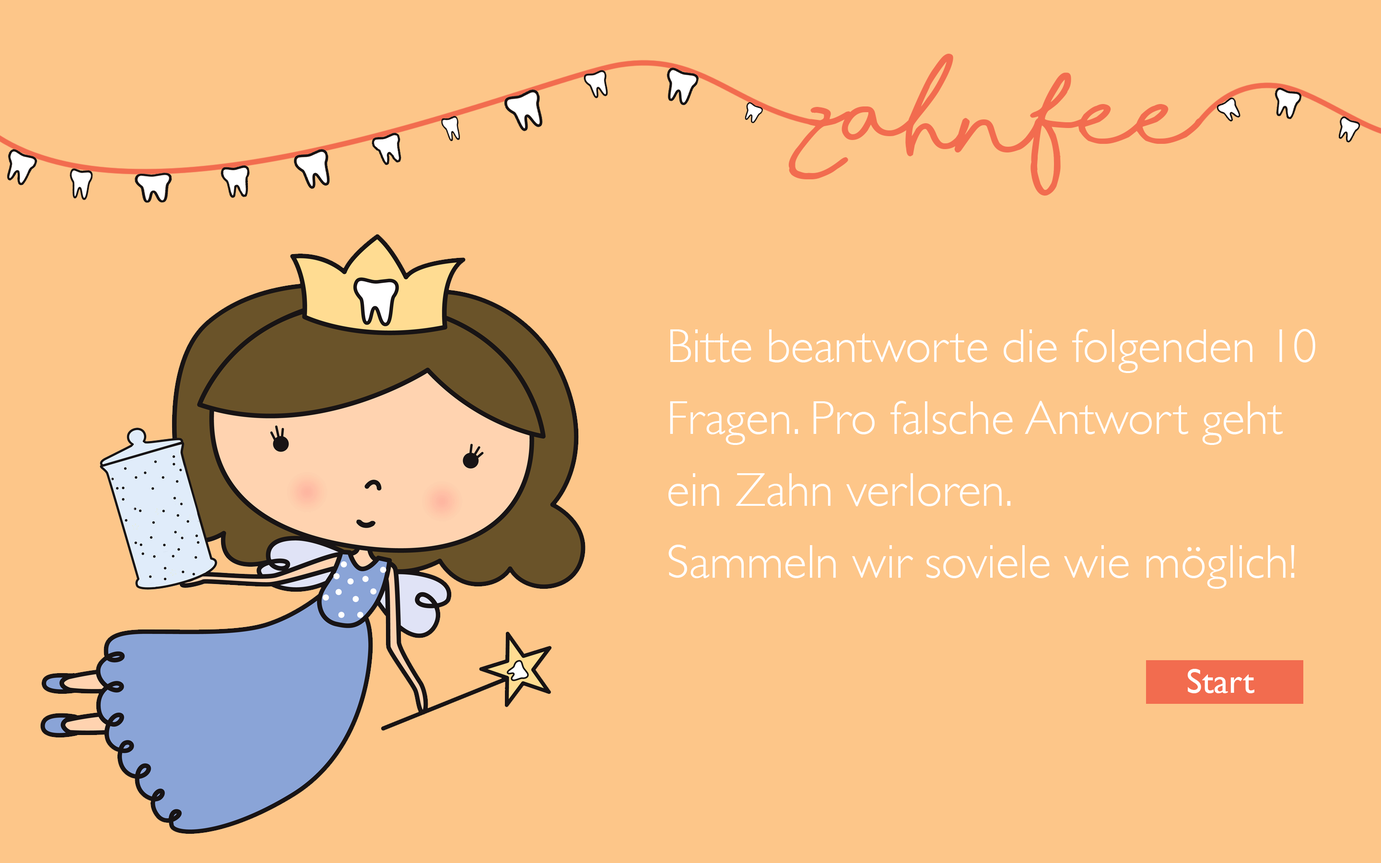
<style>
.page{position:relative;width:1381px;height:863px;background:#fdc689}
.page>*{position:absolute;margin:0}
.t1{font:95.9px "ShorelinesScriptBold";color:#f26c4f}
.t2{font:48px/71.9px "GillSans-Light";color:#ffffff}
.t3{font:34.5px "GillSans";color:#ffffff}
</style>
<div class="page">
<p class="t1" style="left:788px;top:54px;width:415px;height:142px">zahnfee</p>
<p class="t2" style="left:669px;top:329px;width:647px;height:260px">Bitte beantworte die folgenden 10 Fragen. Pro falsche Antwort geht ein Zahn verloren. <br>Sammeln wir soviele wie möglich!</p>
<p class="t3" style="left:1188px;top:669px;width:67px;height:25px">Start</p>
</div>
